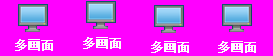
<style>
.page{position:relative;width:273px;height:56px;background:#ff00ff}
.page>*{position:absolute;margin:0}
.t1{font:12px "SimSun";color:#fefdfe;font-weight:bold}
</style>
<div class="page">
<p class="t1" style="left:15px;top:39px;width:38px;height:12px">多画面</p>
<p class="t1" style="left:83px;top:37px;width:38px;height:12px">多画面</p>
<p class="t1" style="left:151px;top:41px;width:38px;height:12px">多画面</p>
<p class="t1" style="left:218px;top:41px;width:38px;height:12px">多画面</p>
</div>
